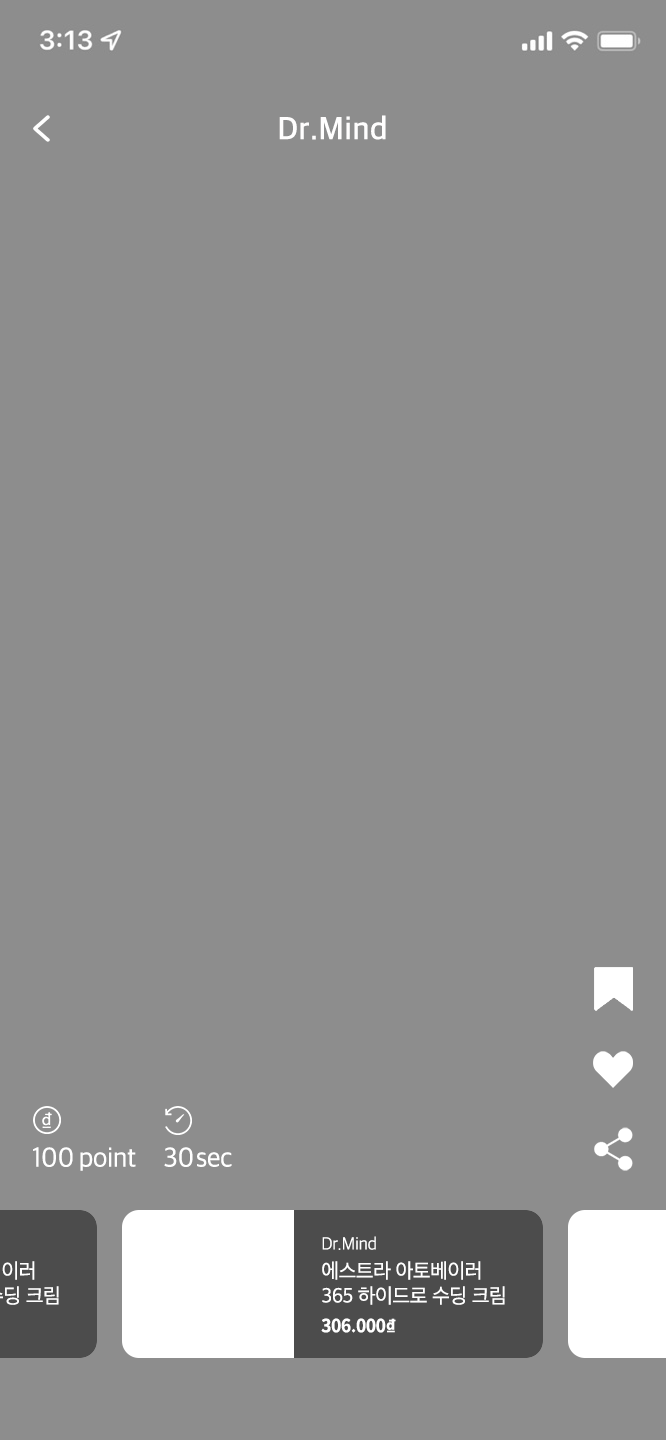
<style>
.page{position:relative;width:666px;height:1440px;background:#8d8d8d}
.page>*{position:absolute;margin:0}
.t1{font:32px "AppleSDGothicNeo-SemiBold";letter-spacing:0.02em;color:#fffefe;scale:0.97 1}
.t2{font:28px "AppleSDGothicNeo-Regular";letter-spacing:-0.01em;color:#ffffff;scale:0.96 1}
.t3{font:28px "AppleSDGothicNeo-Regular";letter-spacing:-0.1em;color:#ffffff;scale:0.96 1}
.t4{font:21px/25px "AppleSDGothicNeo-Regular";letter-spacing:-0.015em;color:#ffffff;scale:0.97 1}
.t5{font:18px/28px "AppleSDGothicNeo-Light";letter-spacing:-0.01em;color:#ffffff;scale:0.97 1}
.t6{font:18px/28px "AppleSDGothicNeo-Light";letter-spacing:-0.01em;color:#ffffff;text-transform:uppercase;scale:0.97 1}
.t7{font:21px/28px "AppleSDGothicNeo-Regular";letter-spacing:-0.015em;color:#ffffff;scale:0.97 1}
.t8{font:18px "NotoSansCJKkr-Bold";letter-spacing:-0.02em;color:#ffffff;scale:0.96 1}
</style>
<div class="page">
<p class="t1" style="left:279px;top:115px;width:107px;height:25px">Dr.Mind</p>
<p class="t2" style="left:33px;top:1147px;width:103px;height:24px">100 point</p>
<p class="t2" style="left:164px;top:1147px;width:68px;height:20px">3<span class="t3">0 </span>sec</p>
<p class="t4" style="left:322px;top:1236px;width:183px;height:69px"><span class="t5">Dr.</span><span class="t6">m</span><span class="t5">ind<br></span><span class="t7">에스트라 아토베이러<br></span>365 하이드로 수딩 크림</p>
<p class="t8" style="left:321px;top:1318px;width:75px;height:15px">306.000₫</p>
</div>
